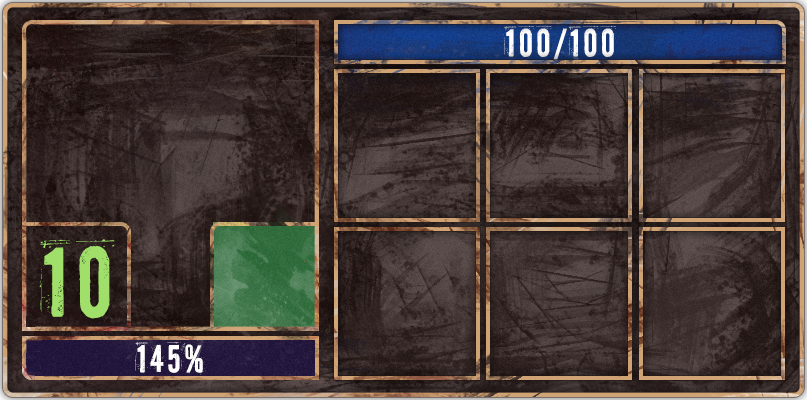
<style>
.page{position:relative;width:807px;height:400px}
.page>*{position:absolute;margin:0}
.t1{font:37.6px "PFFuelPro-Regular";color:#ffffff}
.t2{font:95.4px "PFFuelPro-Regular";color:#a1df6b}
.t3{font:37.8px "PFFuelPro-Regular";color:#ffffff}
</style>
<div class="page">
<p class="t1" style="left:503px;top:25px;width:113px;height:39px">100/100</p>
<p class="t2" style="left:38px;top:239px;width:77px;height:80px">10</p>
<p class="t3" style="left:135px;top:340px;width:71px;height:35px">145%</p>
</div>
